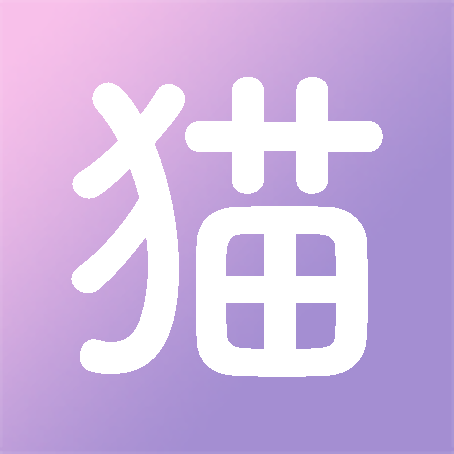
<style>
.page{position:relative;width:454px;height:454px;background:#ffffff}
.page>*{position:absolute;margin:0}
.t1{font:350px "TsukuARdGothicStd-B";color:#ffffff}
</style>
<div class="page">
<p class="t1" style="left:71px;top:77px;width:312px;height:300px">猫</p>
</div>
